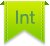
<style>
.page{position:relative;width:50px;height:46px;background:#ffffff}
.page>*{position:absolute;margin:0}
.t1{font:18px "HelveticaNeue";color:#559657}
</style>
<div class="page">
<p class="t1" style="left:16px;top:10px;width:19px;height:14px">Int</p>
</div>
